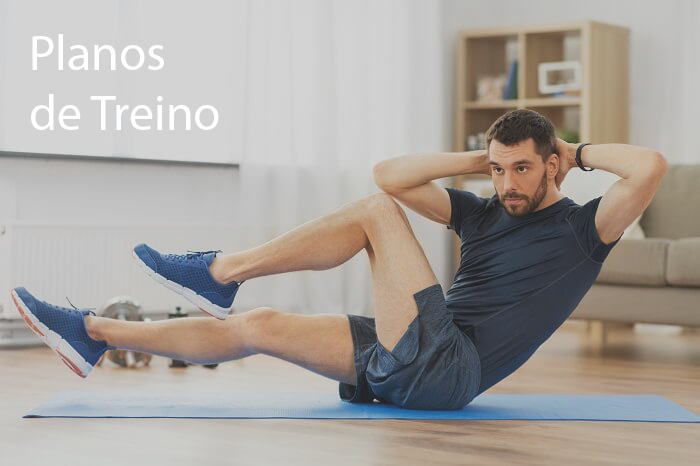
<style>
.page{position:relative;width:700px;height:466px}
.page>*{position:absolute;margin:0}
.t1{font:50px "MyriadPro-Regular";color:#ffffff}
</style>
<div class="page">
<p class="t1" style="left:31px;top:34px;width:188px;height:96px">Planos <br>de Treino</p>
</div>
